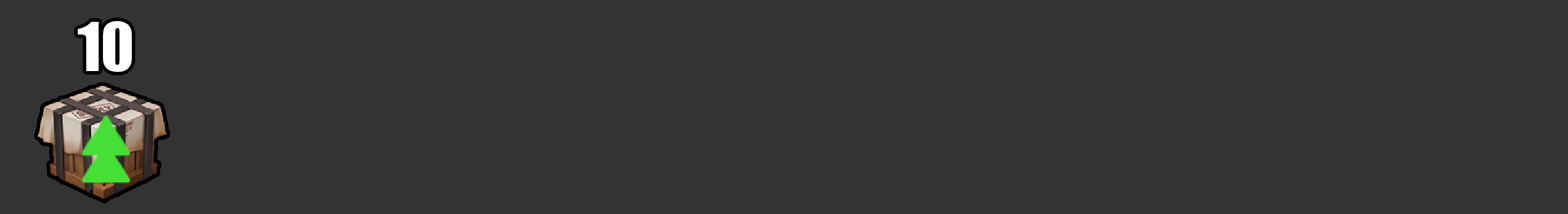
<style>
.page{position:relative;width:1568px;height:214px;background:#333333}
.page>*{position:absolute;margin:0}
.t1{font:62.4px "Impact";color:#ffffff}
</style>
<div class="page">
<p class="t1" style="left:78px;top:21px;width:54px;height:51px">10</p>
</div>
